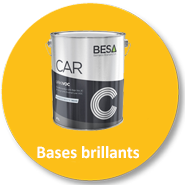
<style>
.page{position:relative;width:185px;height:185px;background:#fcbf18}
.page>*{position:absolute;margin:0}
.t1{font:17.8px "Calibri-Bold";color:#ffffff}
</style>
<div class="page">
<p class="t1" style="left:37px;top:146px;width:102px;height:13px">Bases brillants</p>
</div>
